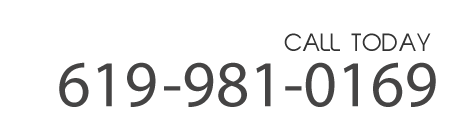
<style>
.page{position:relative;width:450px;height:140px;background:#ffffff}
.page>*{position:absolute;margin:0}
.t1{font:65.7px "MyriadPro-Regular";color:#454444}
.t2{font:65.7px "MyriadPro-Regular";letter-spacing:0.06em;color:#454444}
</style>
<div class="page">
<p class="t1" style="left:59px;top:62px;width:377px;height:45px">61<span class="t2">9</span>-981-0169</p>
</div>
